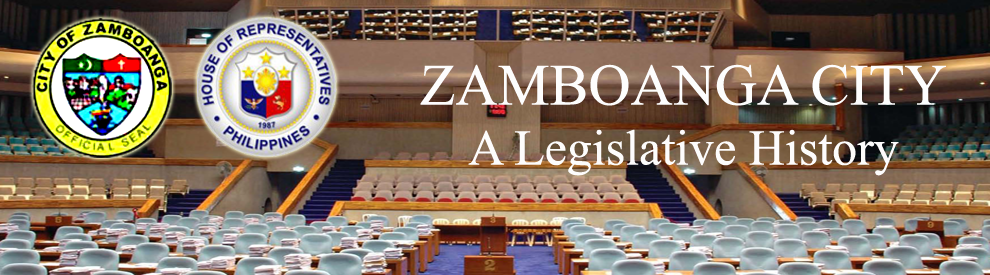
<style>
.page{position:relative;width:990px;height:275px}
.page>*{position:absolute;margin:0}
.t1{font:50px "TimesNewRomanPSMT";color:#fdfcfc}
.t2{font:58.3px "TimesNewRomanPSMT";color:#fdfdfd}
</style>
<div class="page">
<p class="t1" style="left:420px;top:64px;width:526px;height:112px;text-align:center"><span class="t2">ZAMBOANGA CITY<br></span>A Legislative History</p>
</div>
